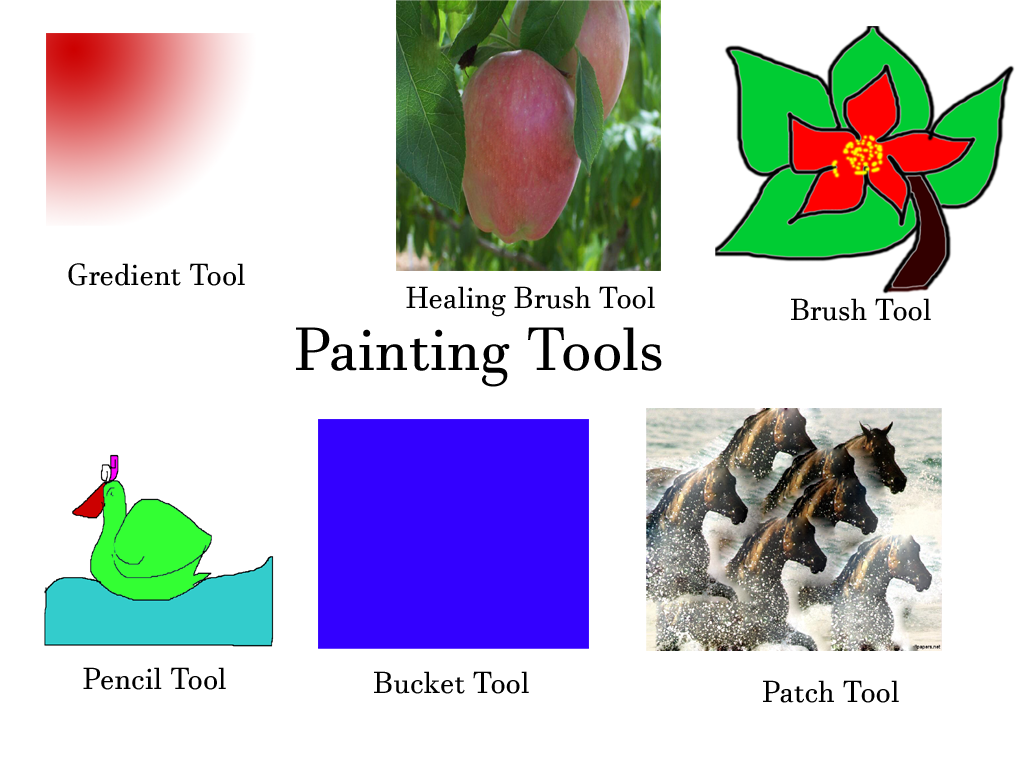
<style>
.page{position:relative;width:1024px;height:768px;background:#ffffff}
.page>*{position:absolute;margin:0}
.t1{font:30px "JavaneseText";color:#000000}
.t2{font:60px "JavaneseText";color:#000000}
</style>
<div class="page">
<p class="t1" style="left:68px;top:263px;width:177px;height:23px">Gredient Tool</p>
<p class="t1" style="left:406px;top:286px;width:249px;height:31px">Healing Brush Tool</p>
<p class="t1" style="left:791px;top:298px;width:140px;height:23px">Brush Tool</p>
<p class="t2" style="left:296px;top:327px;width:366px;height:60px">Painting Tools</p>
<p class="t1" style="left:83px;top:667px;width:143px;height:23px">Pencil Tool</p>
<p class="t1" style="left:374px;top:671px;width:155px;height:23px">Bucket Tool</p>
<p class="t1" style="left:763px;top:680px;width:136px;height:23px">Patch Tool</p>
</div>
